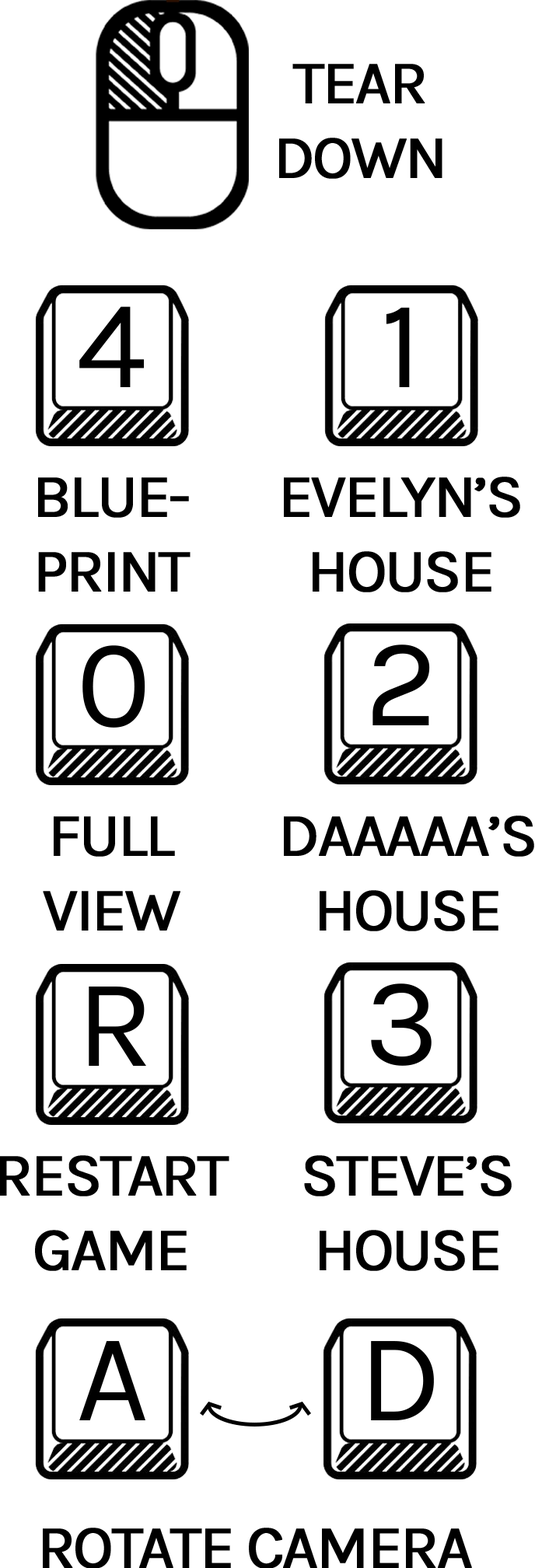
<style>
.page{position:relative;width:535px;height:1568px;background:#ffffff}
.page>*{position:absolute;margin:0}
.t1{font:61.6px "Karla-Regular";letter-spacing:-0.05em;color:#000000;font-weight:bold}
.t2{font:126.1px "Karla-Regular";letter-spacing:-0.05em;color:#000000}
</style>
<div class="page">
<p class="t1" style="left:279px;top:64px;width:163px;height:115px;text-align:center">TEAR<br>DOWN</p>
<p class="t2" style="left:79px;top:306px;width:65px;height:81px">4</p>
<p class="t2" style="left:386px;top:307px;width:24px;height:80px">1</p>
<p class="t1" style="left:38px;top:477px;width:152px;height:115px;text-align:center">BLUE-<br>PRINT</p>
<p class="t1" style="left:284px;top:477px;width:236px;height:115px;text-align:center">EVELYN’S<br>HOUSE</p>
<p class="t2" style="left:82px;top:645px;width:63px;height:83px">0</p>
<p class="t2" style="left:372px;top:644px;width:58px;height:81px">2</p>
<p class="t1" style="left:43px;top:816px;width:137px;height:115px;text-align:center">FULL<br>VIEW</p>
<p class="t1" style="left:284px;top:815px;width:250px;height:116px;text-align:center">DAAAAA’S<br>HOUSE</p>
<p class="t2" style="left:89px;top:987px;width:57px;height:79px">R</p>
<p class="t2" style="left:371px;top:983px;width:60px;height:83px">3</p>
<p class="t1" style="left:0px;top:1155px;width:229px;height:116px;text-align:center">RESTART<br>GAME</p>
<p class="t1" style="left:304px;top:1155px;width:208px;height:116px;text-align:center">STEVE’S<br>HOUSE</p>
<p class="t2" style="left:79px;top:1341px;width:66px;height:79px">A</p>
<p class="t2" style="left:371px;top:1341px;width:63px;height:79px">D</p>
<p class="t1" style="left:43px;top:1528px;width:429px;height:41px">ROTATE CAMERA</p>
</div>
